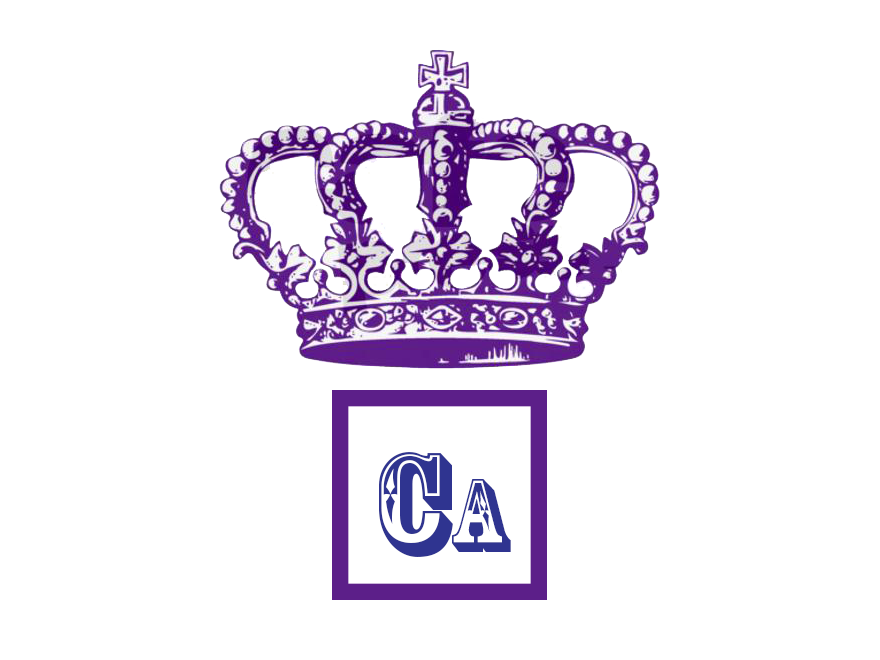
<style>
.page{position:relative;width:880px;height:660px;background:#ffffff}
.page>*{position:absolute;margin:0}
.t1{font:138px "RosewoodStd-Regular";color:#2f3490;font-variant:small-caps}
</style>
<div class="page">
<p class="t1" style="left:379px;top:452px;width:132px;height:105px">Ca</p>
</div>
